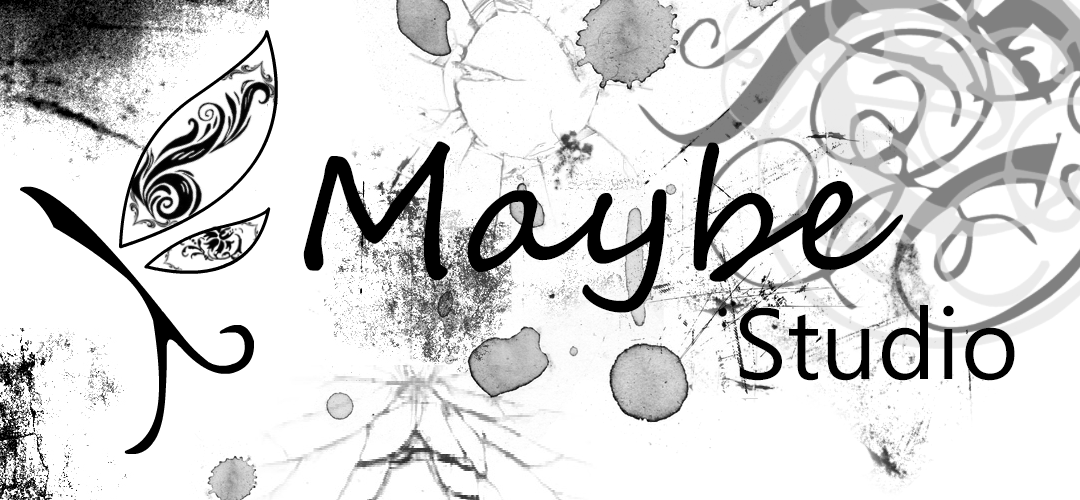
<style>
.page{position:relative;width:1080px;height:500px;background:#ffffff}
.page>*{position:absolute;margin:0}
.t1{font:166.6px "SegoeScript";color:#000000}
.t2{font:100px "SegoeUI";color:#000000}
</style>
<div class="page">
<p class="t1" style="left:303px;top:141px;width:600px;height:172px">Maybe</p>
<p class="t2" style="left:739px;top:305px;width:276px;height:76px">Studio</p>
</div>
